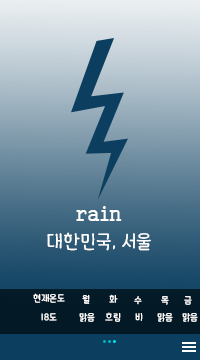
<style>
.page{position:relative;width:200px;height:360px}
.page>*{position:absolute;margin:0}
.t1{font:20px "Gungsuh";color:#ffffff}
.t2{font:20px "HUSpringfever120";color:#ffffff}
.t3{font:10px "HUSpringfever120";color:#ffffff}
</style>
<div class="page">
<p class="t1" style="left:76px;top:206px;width:46px;height:15px">rain</p>
<p class="t2" style="left:47px;top:232px;width:104px;height:19px">대한민국, 서울</p>
<p class="t3" style="left:33px;top:293px;width:32px;height:10px">현재온도</p>
<p class="t3" style="left:109px;top:294px;width:9px;height:9px">화</p>
<p class="t3" style="left:82px;top:295px;width:8px;height:9px">월</p>
<p class="t3" style="left:134px;top:296px;width:8px;height:9px">수</p>
<p class="t3" style="left:161px;top:296px;width:8px;height:9px">목</p>
<p class="t3" style="left:184px;top:296px;width:8px;height:9px">금</p>
<p class="t3" style="left:41px;top:313px;width:16px;height:8px">18도</p>
<p class="t3" style="left:79px;top:313px;width:16px;height:9px">맑음</p>
<p class="t3" style="left:105px;top:312px;width:16px;height:10px">흐림</p>
<p class="t3" style="left:135px;top:313px;width:8px;height:8px">비</p>
<p class="t3" style="left:157px;top:313px;width:16px;height:9px">맑음</p>
<p class="t3" style="left:182px;top:313px;width:16px;height:9px">맑음</p>
</div>
